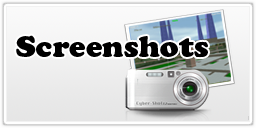
<style>
.page{position:relative;width:256px;height:128px}
.page>*{position:absolute;margin:0}
.t1{font:30px "CooperBlackStd";color:#000000}
</style>
<div class="page">
<p class="t1" style="left:16px;top:35px;width:192px;height:23px">Screenshots</p>
</div>
